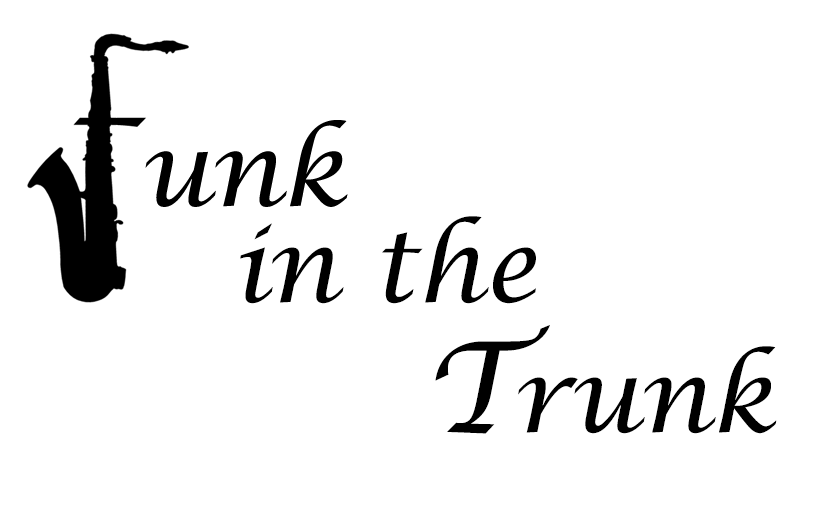
<style>
.page{position:relative;width:816px;height:527px;background:#ffffff}
.page>*{position:absolute;margin:0}
.t1{font:100px "LucidaCalligraphy-Italic";color:#000000}
.t2{font:125px "LucidaCalligraphy-Italic";color:#000000}
</style>
<div class="page">
<p class="t1" style="left:240px;top:216px;width:296px;height:88px">in the</p>
<p class="t1" style="left:435px;top:325px;width:342px;height:109px"><span class="t2">T</span>runk</p>
</div>
